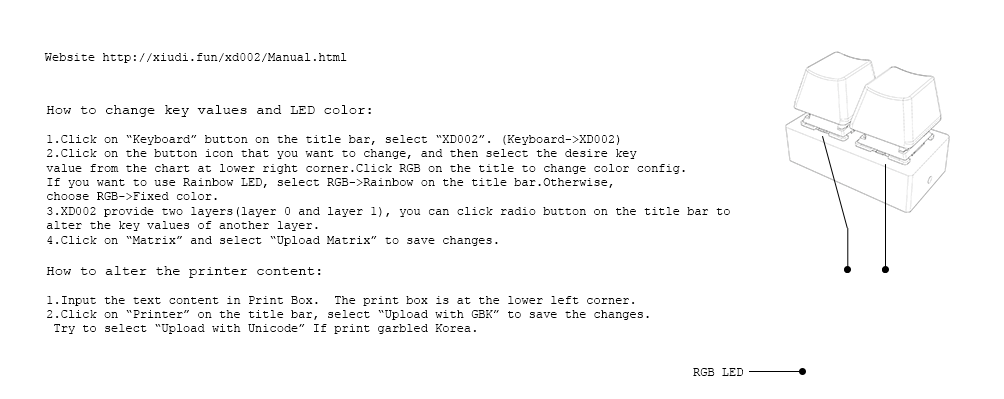
<style>
.page{position:relative;width:1004px;height:399px;background:#ffffff}
.page>*{position:absolute;margin:0}
.t1{font:12px "CourierNewPSMT";color:#000000}
.t2{font:14px "CourierNewPSMT";color:#000000}
</style>
<div class="page">
<p class="t1" style="left:44px;top:53px;width:303px;height:10px">Website http://xiudi.fun/xd002/Manual.html</p>
<p class="t1" style="left:46px;top:105px;width:684px;height:229px"><span class="t2">How to change key values and LED color:<br></span><br>1.Click on “Keyboard” button on the title bar, select “XD002”. (Keyboard-&gt;XD002)<br>2.Click on the button icon that you want to change, and then select the desire key <br>value from the chart at lower right corner.Click RGB on the title to change color config.<br>If you want to use Rainbow LED, select RGB-&gt;Rainbow on the title bar.Otherwise, <br>choose RGB-&gt;Fixed color.<br>3.XD002 provide two layers(layer 0 and layer 1), you can click radio button on the title bar to <br>alter the key values of another layer.<br>4.Click on “Matrix” and select “Upload Matrix” to save changes.<br><br><span class="t2">How to alter the printer content:<br></span><br>1.Input the text content in Print Box.  The print box is at the lower left corner.<br>2.Click on “Printer” on the title bar, select “Upload with GBK” to save the changes.<br> Try to select “Upload with Unicode” If print garbled Korea.</p>
<p class="t1" style="left:693px;top:368px;width:50px;height:8px">RGB LED</p>
</div>
